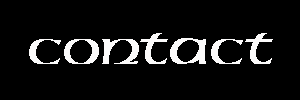
<style>
.page{position:relative;width:300px;height:100px;background:#000000}
.page>*{position:absolute;margin:0}
.t1{font:53.3px "Herald";color:#fcfbfb}
</style>
<div class="page">
<p class="t1" style="left:29px;top:33px;width:244px;height:31px">contact</p>
</div>
